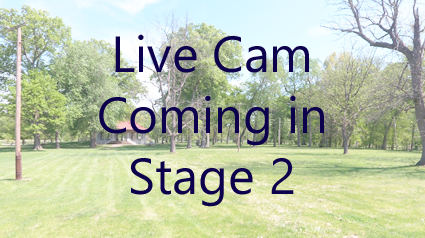
<style>
.page{position:relative;width:425px;height:238px}
.page>*{position:absolute;margin:0}
.t1{font:50.8px "Gadugi";color:#0d004c}
</style>
<div class="page">
<p class="t1" style="left:99px;top:34px;width:225px;height:173px;text-align:center">Live Cam<br>Coming in <br>Stage 2</p>
</div>
